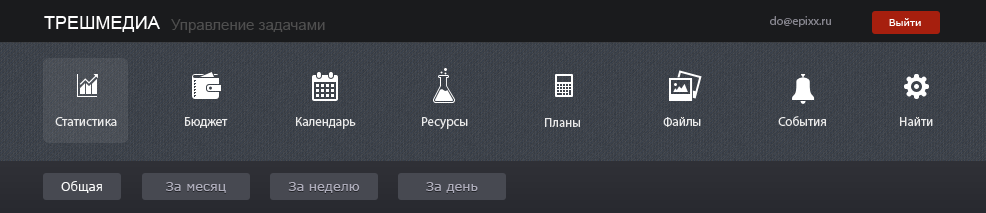
<style>
.page{position:relative;width:986px;height:213px}
.page>*{position:absolute;margin:0}
.t1{font:18px "ArialMT";color:#ffffff;text-transform:uppercase}
.t2{font:12px "MyriadPro-Regular";color:#86858e}
.t3{font:15px "ArialMT";color:#4f4f4f}
.t4{font:10px "Verdana";color:#fefefe}
.t5{font:13px "MyriadPro-Regular";color:#eaeaea}
.t6{font:12px "Verdana";color:#f9f9f9}
.t7{font:13px "Verdana";color:#aeadbb}
</style>
<div class="page">
<p class="t1" style="left:44px;top:16px;width:116px;height:16px">ТРЕШМЕДИа</p>
<p class="t2" style="left:770px;top:16px;width:61px;height:11px">do@epixx.ru</p>
<p class="t3" style="left:171px;top:19px;width:154px;height:14px">Управление задачами</p>
<p class="t4" style="left:889px;top:18px;width:32px;height:8px">Выйти</p>
<p class="t5" style="left:55px;top:117px;width:62px;height:9px">Статистика</p>
<p class="t5" style="left:185px;top:117px;width:43px;height:11px">Бюджет</p>
<p class="t5" style="left:296px;top:117px;width:60px;height:12px">Календарь</p>
<p class="t5" style="left:422px;top:117px;width:46px;height:12px">Ресурсы</p>
<p class="t5" style="left:545px;top:118px;width:35px;height:9px">Планы</p>
<p class="t5" style="left:663px;top:117px;width:38px;height:10px">Файлы</p>
<p class="t5" style="left:778px;top:116px;width:48px;height:10px">События</p>
<p class="t5" style="left:900px;top:117px;width:33px;height:9px">Найти</p>
<p class="t6" style="left:61px;top:181px;width:41px;height:12px">Общая</p>
<p class="t7" style="left:166px;top:182px;width:60px;height:11px">За месяц</p>
<p class="t7" style="left:288px;top:182px;width:72px;height:11px">За неделю</p>
<p class="t7" style="left:426px;top:182px;width:52px;height:11px">За день</p>
</div>
